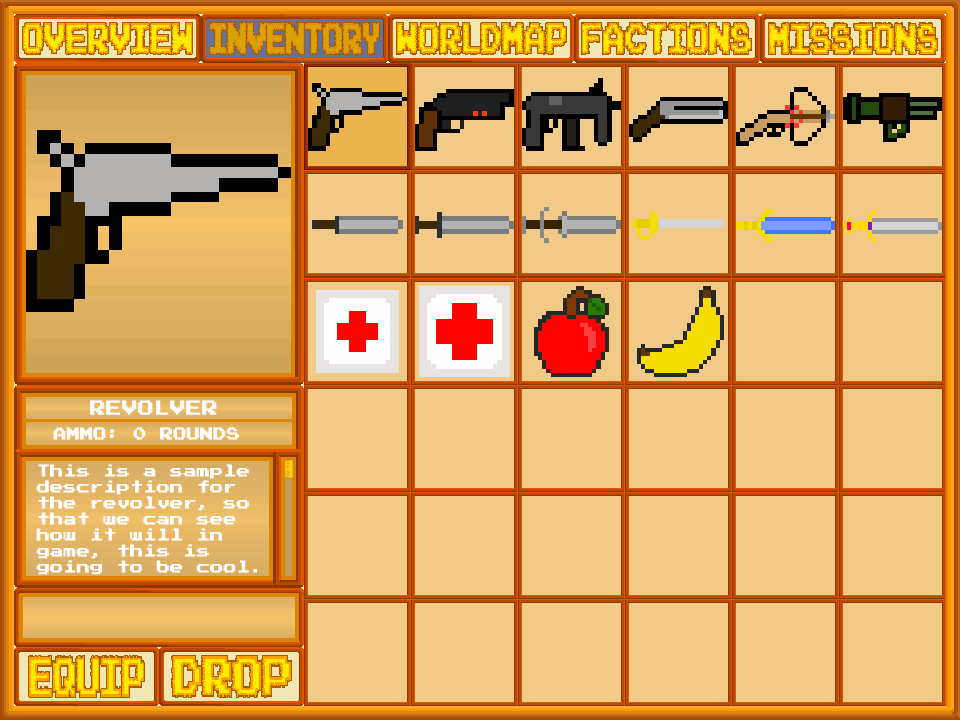
<style>
.page{position:relative;width:960px;height:720px;background:#f1ca87}
.page>*{position:absolute;margin:0}
.t1{font:12px "PressStart2P";color:#ffffff}
.t2{font:13.3px "PressStart2P";color:#ffffff}
</style>
<div class="page">
<p class="t1" style="left:90px;top:400px;width:127px;height:15px">REVOLVER</p>
<p class="t2" style="left:53px;top:427px;width:186px;height:13px">AMMO: 0 ROUNDS</p>
<p class="t2" style="left:36px;top:464px;width:221px;height:111px">This is a sample description for the revolver, so that we can see how it will in game, this is going to be cool.</p>
</div>
